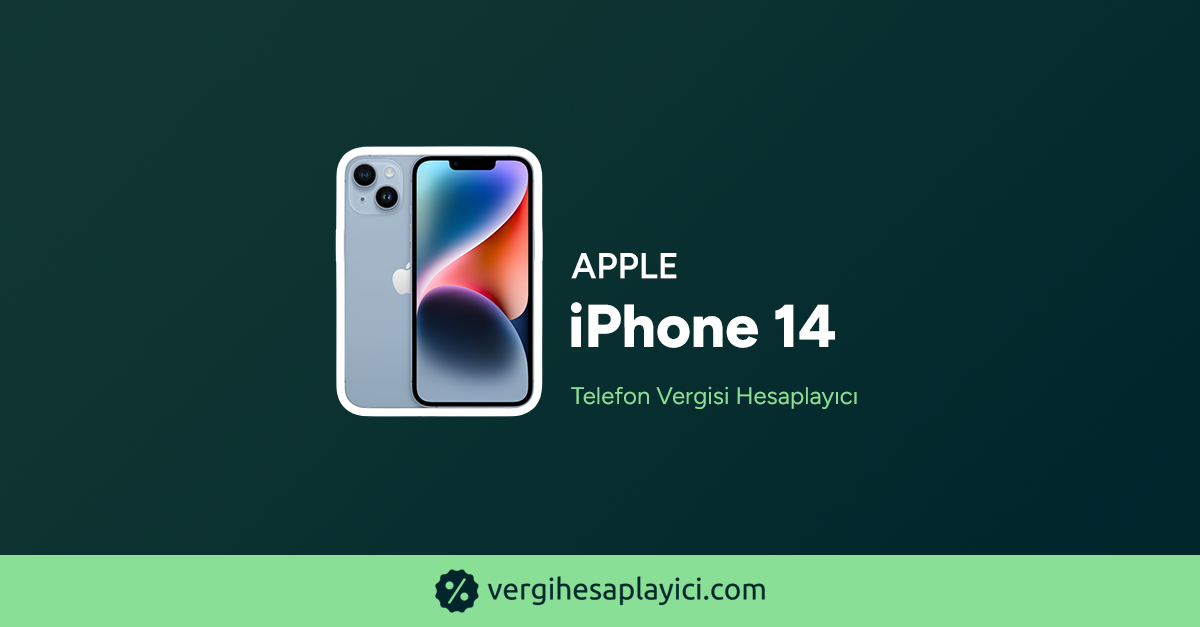
<style>
.page{position:relative;width:1200px;height:627px}
.page>*{position:absolute;margin:0}
.t1{font:36px "Figtree-SemiBold";color:#ffffff;text-transform:uppercase;font-weight:bold}
.t2{font:60.3px "Figtree-ExtraBold";color:#ffffff;font-weight:bold}
.t3{font:24px "Figtree-Regular";color:#88df95;font-weight:bold}
</style>
<div class="page">
<p class="t1" style="left:571px;top:253px;width:106px;height:26px">Apple</p>
<p class="t2" style="left:571px;top:302px;width:264px;height:46px">iPhone 14</p>
<p class="t3" style="left:571px;top:386px;width:286px;height:23px">Telefon Vergisi Hesaplayıcı</p>
</div>
